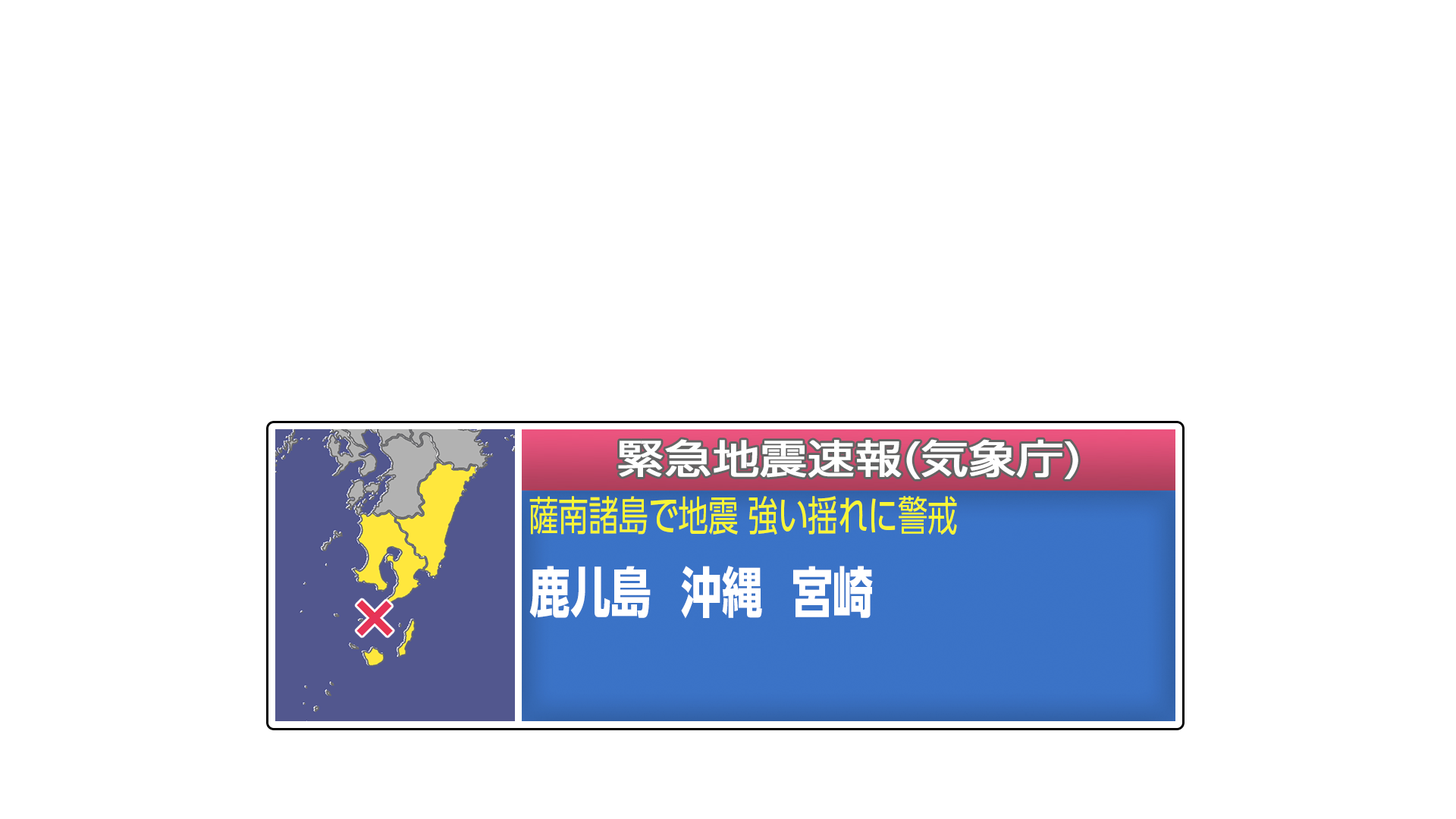
<style>
.page{position:relative;width:1456px;height:819px;background:#ffffff}
.page>*{position:absolute;margin:0}
.t1{font:41px "UDShinGoPro-Regular";letter-spacing:-0.005em;color:#f8f536;scale:0.73 1}
.t2{font:54.5px "UDShinGoCOnizPr6-Bol";letter-spacing:-0.005em;color:#ffffff;scale:0.83 1}
</style>
<div class="page">
<p class="t1" style="left:529px;top:496px;width:428px;height:39px">薩南諸島で地震 強い揺れに警戒</p>
<p class="t2" style="left:529px;top:566px;width:344px;height:53px">鹿儿島  沖縄  宮崎</p>
</div>
